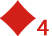
<style>
.page{position:relative;width:52px;height:36px;background:#ffffff}
.page>*{position:absolute;margin:0}
.t1{font:23.4px "MyriadPro-Regular";letter-spacing:-0.1em;color:#d22018;font-weight:bold}
</style>
<div class="page">
<p class="t1" style="left:37px;top:19px;width:12px;height:17px">4</p>
</div>
